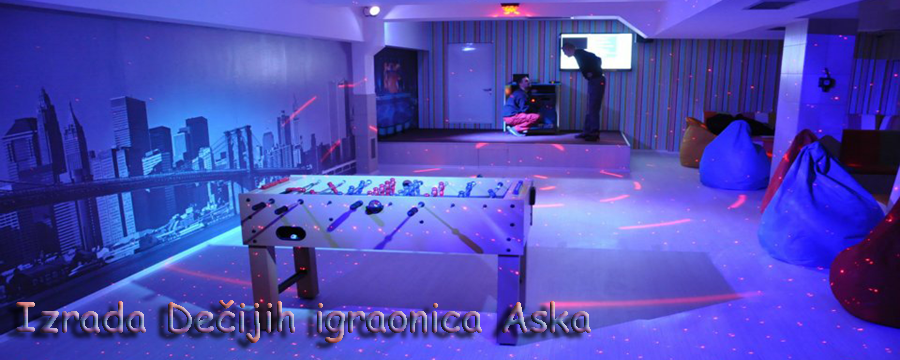
<style>
.page{position:relative;width:900px;height:360px}
.page>*{position:absolute;margin:0}
.t1{font:40px "ComicSansMS-Bold"}
</style>
<div class="page">
<p class="t1" style="left:16px;top:300px;width:575px;height:43px">Izrada Dečijih igraonica Aska</p>
</div>
